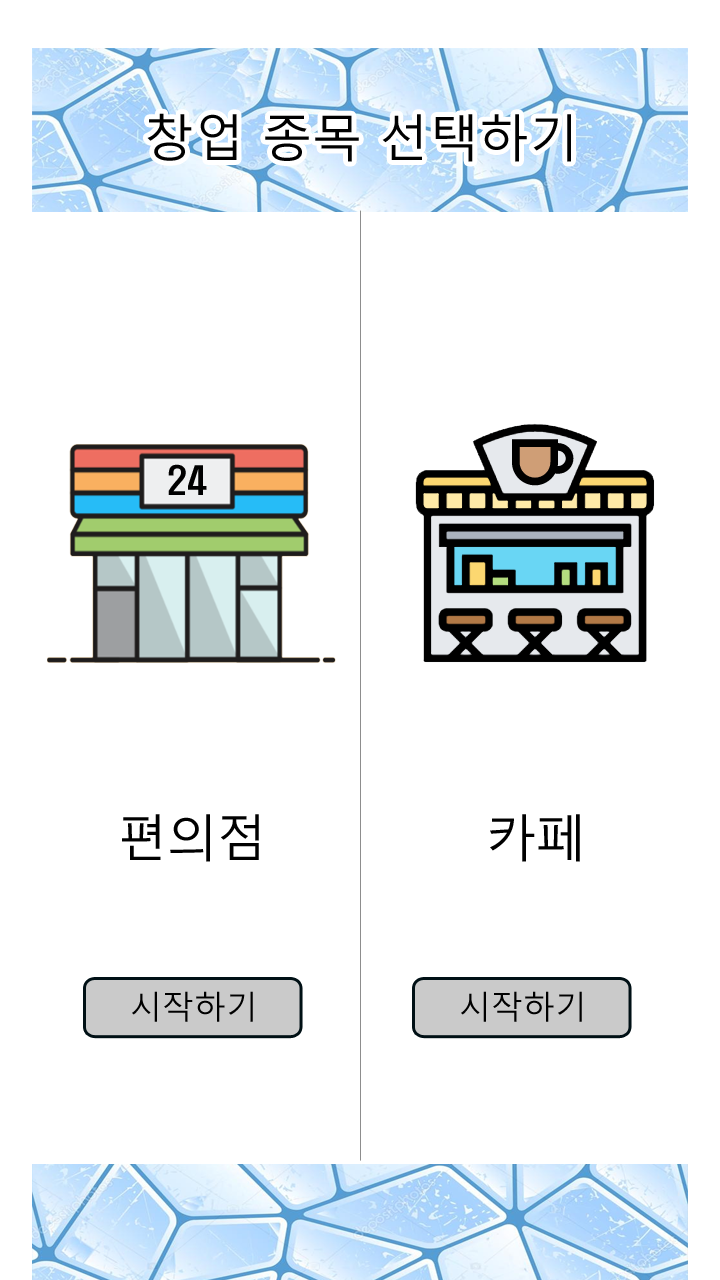
<style>
.page{position:relative;width:720px;height:1280px;background:#ffffff}
.page>*{position:absolute;margin:0}
.t1{font:50px "MalgunGothic";color:#000000}
.t2{font:35px "H2hdrM";color:#000000}
.t3{font:32px "MalgunGothic";color:#000000}
</style>
<div class="page">
<p class="t1" style="left:147px;top:113px;width:424px;height:49px">창업 종목 선택하기</p>
<p class="t2" style="left:168px;top:464px;width:39px;height:31px">24</p>
<p class="t1" style="left:122px;top:814px;width:137px;height:48px">편의점</p>
<p class="t1" style="left:490px;top:814px;width:90px;height:48px">카페</p>
<p class="t3" style="left:132px;top:991px;width:121px;height:31px">시작하기</p>
<p class="t3" style="left:461px;top:991px;width:121px;height:31px">시작하기</p>
</div>
